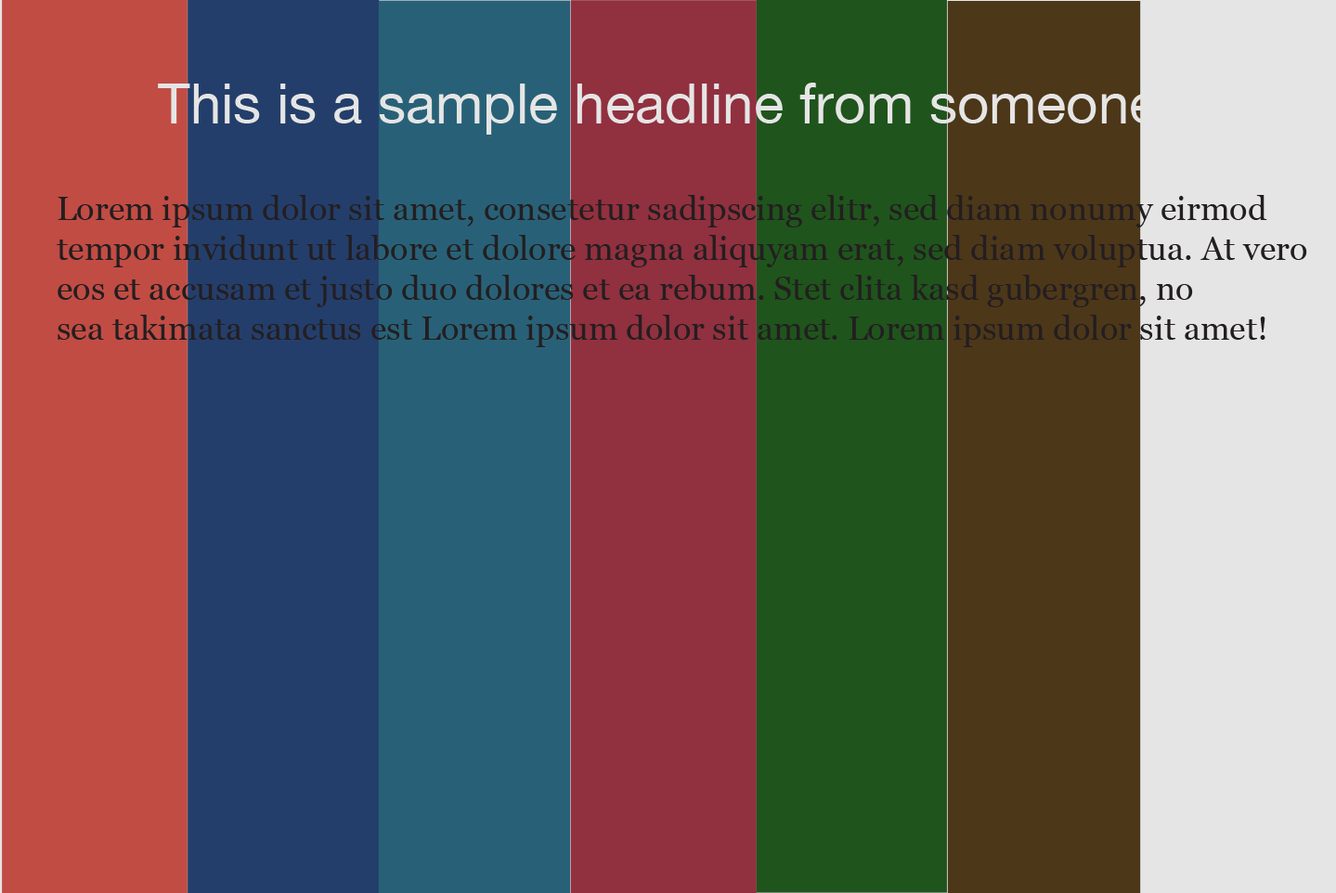
<style>
.page{position:relative;width:1336px;height:893px}
.page>*{position:absolute;margin:0}
.t1{font:55.7px "HelveticaNeue";color:#e5e5e5}
.t2{font:33.4px "Georgia";color:#231e20}
</style>
<div class="page">
<p class="t1" style="left:158px;top:83px;width:1011px;height:52px">This is a sample headline from someone.</p>
<p class="t2" style="left:57px;top:195px;width:1250px;height:152px">Lorem ipsum dolor sit amet, consetetur sadipscing elitr, sed diam nonumy eirmod<br>tempor invidunt ut labore et dolore magna aliquyam erat, sed diam voluptua. At vero<br>eos et accusam et justo duo dolores et ea rebum. Stet clita kasd gubergren, no<br>sea takimata sanctus est Lorem ipsum dolor sit amet. Lorem ipsum dolor sit amet!</p>
</div>
